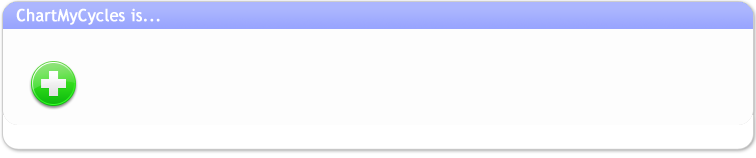
<style>
.page{position:relative;width:756px;height:158px;background:#fdfdfd}
.page>*{position:absolute;margin:0}
.t1{font:16.8px "TrebuchetMS";color:#ffffff;font-weight:bold;scale:0.95 1}
</style>
<div class="page">
<p class="t1" style="left:16px;top:8px;width:144px;height:17px">ChartMyCycles is...</p>
</div>
